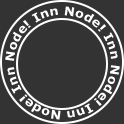
<style>
.page{position:relative;width:124px;height:124px;background:#333333}
.page>*{position:absolute;margin:0}
.t1{font:12px "Verdana-Bold";color:#ffffff;scale:1.07 1}
</style>
<div class="page">
<p class="t1" style="left:5px;top:6px;width:115px;height:114px;text-align:center">Inn Node! Inn Node! Inn Node! Inn Node!</p>
</div>
